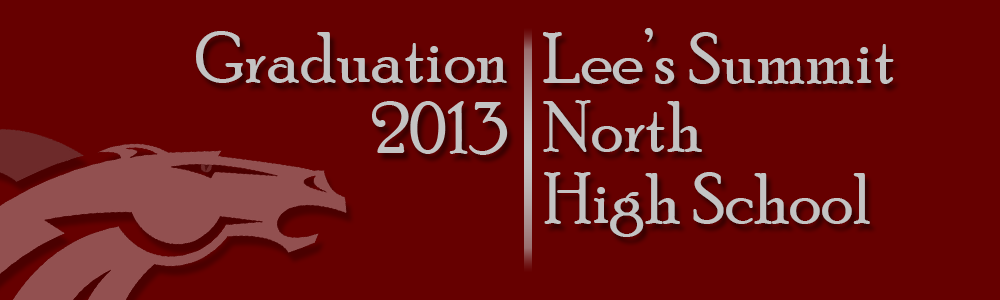
<style>
.page{position:relative;width:1000px;height:300px;background:#660000}
.page>*{position:absolute;margin:0}
.t1{font:72px "PoorRichard-Regular";color:#c3c3c3}
</style>
<div class="page">
<p class="t1" style="left:543px;top:28px;width:351px;height:56px">Lee’s Summit</p>
<p class="t1" style="left:196px;top:31px;width:311px;height:52px">Graduation</p>
<p class="t1" style="left:543px;top:100px;width:159px;height:52px">North</p>
<p class="t1" style="left:544px;top:172px;width:326px;height:65px">High School</p>
</div>
